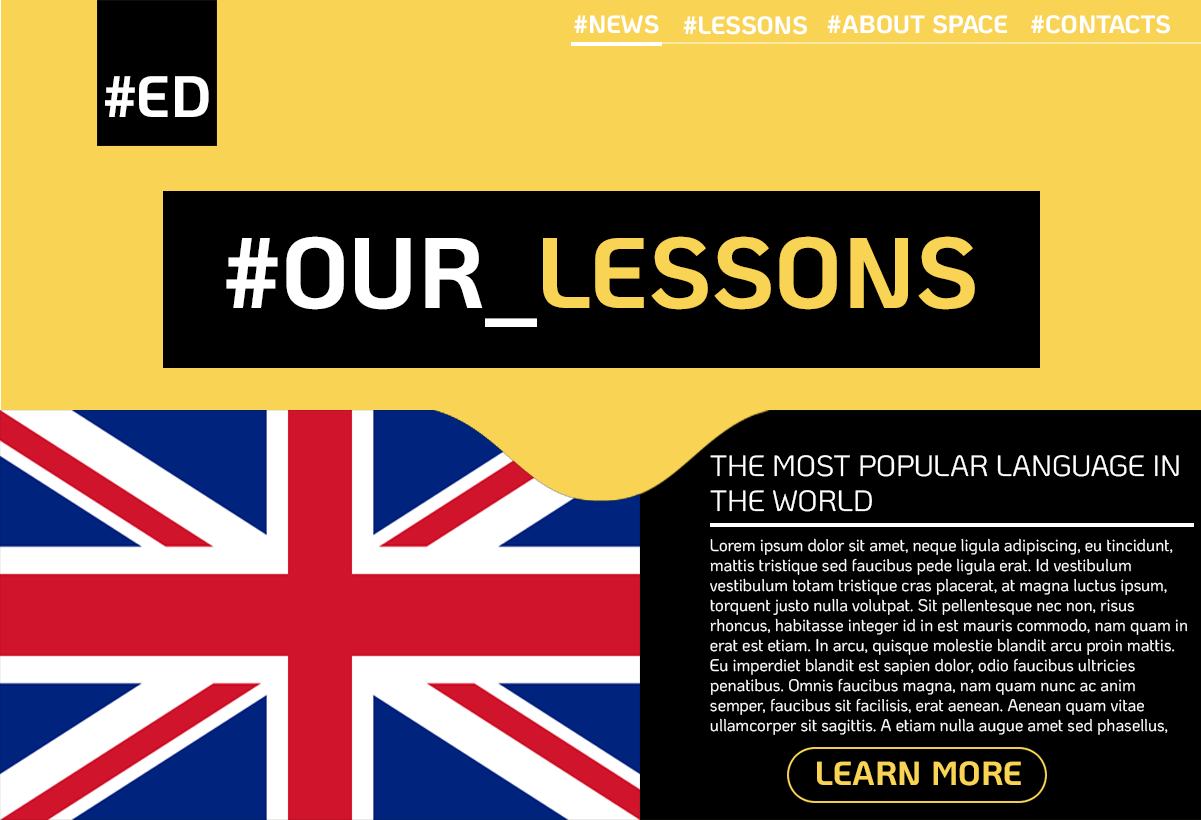
<style>
.page{position:relative;width:1201px;height:820px;background:#f9d454}
.page>*{position:absolute;margin:0}
.t1{font:25px "KoHo-Bold";color:#ffffff}
.t2{font:58.3px "KoHo-Bold";color:#ffffff}
.t3{font:100px "KoHo-Bold";color:#f9d454}
.t4{font:100px "KoHo-Bold";color:#ffffff}
.t5{font:16.7px "KoHo-Regular";color:#ffffff}
.t6{font:29.2px "KoHo-Regular";color:#ffffff}
.t7{font:33.3px "KoHo-Bold";color:#f9d454}
</style>
<div class="page">
<p class="t1" style="left:574px;top:15px;width:85px;height:19px">#NEWS</p>
<p class="t1" style="left:683px;top:16px;width:124px;height:19px">#LESSONS</p>
<p class="t1" style="left:827px;top:15px;width:180px;height:19px">#ABOUT SPACE</p>
<p class="t1" style="left:1031px;top:15px;width:139px;height:19px">#CONTACTS</p>
<p class="t2" style="left:105px;top:76px;width:104px;height:41px">#ED</p>
<p class="t3" style="left:226px;top:236px;width:749px;height:91px"><span class="t4">#OUR_</span>LESSONS</p>
<p class="t5" style="left:710px;top:455px;width:477px;height:280px"><span class="t6">THE MOST POPULAR LANGUAGE IN THE WORLD<br><br></span>Lorem ipsum dolor sit amet, neque ligula adipiscing, eu tincidunt, mattis tristique sed faucibus pede ligula erat. Id vestibulum vestibulum totam tristique cras placerat, at magna luctus ipsum, torquent justo nulla volutpat. Sit pellentesque nec non, risus rhoncus, habitasse integer id in est mauris commodo, nam quam in erat est etiam. In arcu, quisque molestie blandit arcu proin mattis. Eu imperdiet blandit est sapien dolor, odio faucibus ultricies penatibus. Omnis faucibus magna, nam quam nunc ac anim semper, faucibus sit facilisis, erat aenean. Aenean quam vitae ullamcorper sit sagittis. A etiam nulla augue amet sed phasellus, faucibus id. Nulla elementum sed, lacus ligula, in massa malesuada dis sagittis nulla.</p>
<p class="t7" style="left:817px;top:761px;width:204px;height:25px">LEARN MORE</p>
</div>
